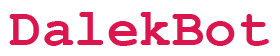
<style>
.page{position:relative;width:280px;height:56px;background:#ffffff}
.page>*{position:absolute;margin:0}
.t1{font:54.2px "CourierNewPS-BoldMT";color:#db164e}
</style>
<div class="page">
<p class="t1" style="left:9px;top:12px;width:260px;height:34px">DalekBot</p>
</div>
